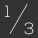
<style>
.page{position:relative;width:38px;height:38px;background:#333333}
.page>*{position:absolute;margin:0}
.t1{font:16px "NexaLight";color:#ffffff;text-transform:uppercase}
.t2{font:16px "NexaLight";text-transform:uppercase}
</style>
<div class="page">
<p class="t1" style="left:5px;top:5px;width:5px;height:12px">1</p>
<p class="t2" style="left:24px;top:22px;width:10px;height:13px">3</p>
</div>
